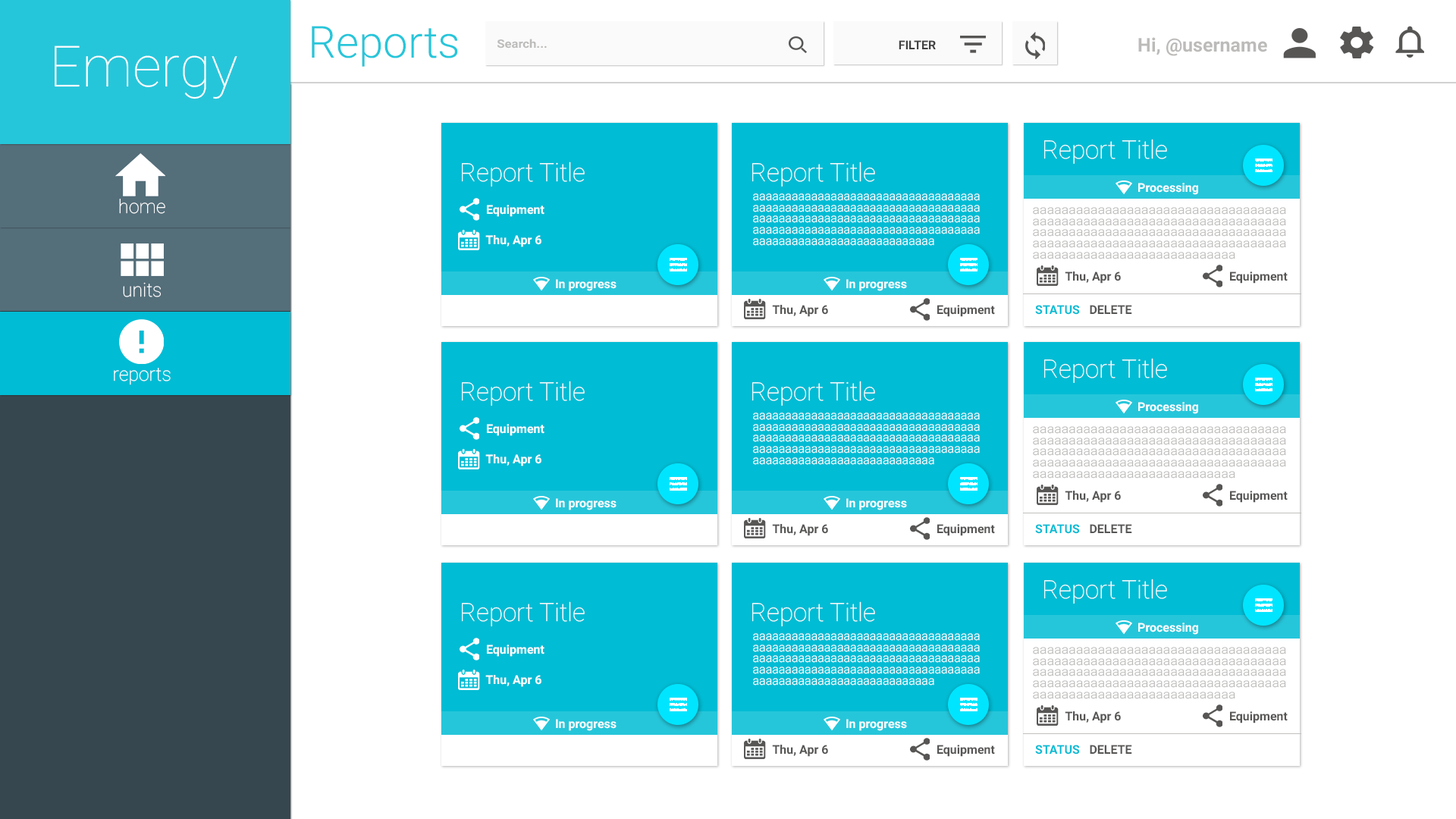
<style>
.page{position:relative;width:1456px;height:819px;background:#ffffff}
.page>*{position:absolute;margin:0}
.t1{font:44.2px "Roboto-Light";color:#26c6da}
.t2{font:11.6px "Roboto-Bold";color:#bcbbb9;scale:1.09 1}
.t3{font:12.1px "Roboto-Bold";color:#424242}
.t4{font:19px "Roboto-Bold";color:#bcbbb9}
.t5{font:56.9px "Roboto-Thin";color:#ffffff}
.t6{font:25.3px "Roboto-Thin";color:#fefefe}
.t7{font:12.1px "Roboto-Bold";color:#fefefe}
.t8{font:12.1px/2.2px "Roboto-Light";color:#ffffff}
.t9{font:19px "Roboto-Thin";color:#ffffff}
.t10{font:12.1px/2.2px "Roboto-Light";color:#bcbbb9;scale:1.12 1}
.t11{font:12.1px "Roboto-Bold";color:#575655}
.t12{font:12.1px "Roboto-Bold";color:#00bcd4}
</style>
<div class="page">
<p class="t1" style="left:312px;top:26px;width:146px;height:41px">Reports</p>
<p class="t2" style="left:497px;top:39px;width:50px;height:10px">Search...</p>
<p class="t3" style="left:899px;top:40px;width:37px;height:9px">FILTER</p>
<p class="t4" style="left:1138px;top:37px;width:129px;height:19px">Hi, @username</p>
<p class="t5" style="left:55px;top:45px;width:182px;height:54px">Emergy</p>
<p class="t6" style="left:1044px;top:139px;width:123px;height:25px">Report Title</p>
<p class="t6" style="left:462px;top:162px;width:123px;height:25px">Report Title</p>
<p class="t6" style="left:752px;top:162px;width:123px;height:25px">Report Title</p>
<p class="t7" style="left:1138px;top:183px;width:60px;height:12px">Processing</p>
<p class="t8" style="left:753px;top:193px;width:227px;height:53px">aaaaaaaaaaaaaaaaaaaaaaaaaaaaaaaaaaa<br><br><br><br><br>aaaaaaaaaaaaaaaaaaaaaaaaaaaaaaaaaaa<br><br><br><br><br>aaaaaaaaaaaaaaaaaaaaaaaaaaaaaaaaaaa<br><br><br><br><br>aaaaaaaaaaaaaaaaaaaaaaaaaaaaaaaaaaa<br><br><br><br><br>aaaaaaaaaaaaaaaaaaaaaaaaaaaa</p>
<p class="t9" style="left:119px;top:199px;width:46px;height:15px">home</p>
<p class="t7" style="left:487px;top:205px;width:57px;height:12px">Equipment</p>
<p class="t10" style="left:1033px;top:207px;width:253px;height:52px">aaaaaaaaaaaaaaaaaaaaaaaaaaaaaaaaaaa<br><br><br><br><br>aaaaaaaaaaaaaaaaaaaaaaaaaaaaaaaaaaa<br><br><br><br><br>aaaaaaaaaaaaaaaaaaaaaaaaaaaaaaaaaaa<br><br><br><br><br>aaaaaaaaaaaaaaaaaaaaaaaaaaaaaaaaaaa<br><br><br><br><br>aaaaaaaaaaaaaaaaaaaaaaaaaaaa</p>
<p class="t7" style="left:485px;top:235px;width:56px;height:12px">Thu, Apr 6</p>
<p class="t7" style="left:556px;top:279px;width:61px;height:12px">In progress</p>
<p class="t7" style="left:846px;top:279px;width:61px;height:12px">In progress</p>
<p class="t11" style="left:1065px;top:271px;width:56px;height:13px">Thu, Apr 6</p>
<p class="t11" style="left:1230px;top:271px;width:58px;height:13px">Equipment</p>
<p class="t9" style="left:123px;top:282px;width:38px;height:15px">units</p>
<p class="t11" style="left:772px;top:305px;width:56px;height:12px">Thu, Apr 6</p>
<p class="t11" style="left:937px;top:305px;width:58px;height:12px">Equipment</p>
<p class="t12" style="left:1035px;top:305px;width:45px;height:10px">STATUS</p>
<p class="t11" style="left:1090px;top:305px;width:42px;height:9px">DELETE</p>
<p class="t6" style="left:1044px;top:358px;width:123px;height:25px">Report Title</p>
<p class="t9" style="left:114px;top:368px;width:57px;height:17px">reports</p>
<p class="t6" style="left:462px;top:381px;width:123px;height:25px">Report Title</p>
<p class="t6" style="left:752px;top:381px;width:123px;height:25px">Report Title</p>
<p class="t7" style="left:1138px;top:402px;width:60px;height:12px">Processing</p>
<p class="t8" style="left:753px;top:413px;width:227px;height:52px">aaaaaaaaaaaaaaaaaaaaaaaaaaaaaaaaaaa<br><br><br><br><br>aaaaaaaaaaaaaaaaaaaaaaaaaaaaaaaaaaa<br><br><br><br><br>aaaaaaaaaaaaaaaaaaaaaaaaaaaaaaaaaaa<br><br><br><br><br>aaaaaaaaaaaaaaaaaaaaaaaaaaaaaaaaaaa<br><br><br><br><br>aaaaaaaaaaaaaaaaaaaaaaaaaaaa</p>
<p class="t7" style="left:487px;top:424px;width:57px;height:12px">Equipment</p>
<p class="t10" style="left:1033px;top:426px;width:253px;height:53px">aaaaaaaaaaaaaaaaaaaaaaaaaaaaaaaaaaa<br><br><br><br><br>aaaaaaaaaaaaaaaaaaaaaaaaaaaaaaaaaaa<br><br><br><br><br>aaaaaaaaaaaaaaaaaaaaaaaaaaaaaaaaaaa<br><br><br><br><br>aaaaaaaaaaaaaaaaaaaaaaaaaaaaaaaaaaa<br><br><br><br><br>aaaaaaaaaaaaaaaaaaaaaaaaaaaa</p>
<p class="t7" style="left:485px;top:454px;width:56px;height:12px">Thu, Apr 6</p>
<p class="t11" style="left:1065px;top:491px;width:56px;height:12px">Thu, Apr 6</p>
<p class="t11" style="left:1230px;top:491px;width:58px;height:12px">Equipment</p>
<p class="t7" style="left:556px;top:498px;width:61px;height:12px">In progress</p>
<p class="t7" style="left:846px;top:498px;width:61px;height:12px">In progress</p>
<p class="t11" style="left:772px;top:524px;width:56px;height:12px">Thu, Apr 6</p>
<p class="t11" style="left:937px;top:524px;width:58px;height:12px">Equipment</p>
<p class="t12" style="left:1035px;top:524px;width:45px;height:10px">STATUS</p>
<p class="t11" style="left:1090px;top:524px;width:42px;height:9px">DELETE</p>
<p class="t6" style="left:1044px;top:579px;width:123px;height:25px">Report Title</p>
<p class="t6" style="left:462px;top:601px;width:123px;height:25px">Report Title</p>
<p class="t6" style="left:752px;top:601px;width:123px;height:25px">Report Title</p>
<p class="t7" style="left:1138px;top:623px;width:60px;height:12px">Processing</p>
<p class="t8" style="left:753px;top:633px;width:227px;height:53px">aaaaaaaaaaaaaaaaaaaaaaaaaaaaaaaaaaa<br><br><br><br><br>aaaaaaaaaaaaaaaaaaaaaaaaaaaaaaaaaaa<br><br><br><br><br>aaaaaaaaaaaaaaaaaaaaaaaaaaaaaaaaaaa<br><br><br><br><br>aaaaaaaaaaaaaaaaaaaaaaaaaaaaaaaaaaa<br><br><br><br><br>aaaaaaaaaaaaaaaaaaaaaaaaaaaa</p>
<p class="t7" style="left:487px;top:645px;width:57px;height:12px">Equipment</p>
<p class="t10" style="left:1033px;top:647px;width:253px;height:52px">aaaaaaaaaaaaaaaaaaaaaaaaaaaaaaaaaaa<br><br><br><br><br>aaaaaaaaaaaaaaaaaaaaaaaaaaaaaaaaaaa<br><br><br><br><br>aaaaaaaaaaaaaaaaaaaaaaaaaaaaaaaaaaa<br><br><br><br><br>aaaaaaaaaaaaaaaaaaaaaaaaaaaaaaaaaaa<br><br><br><br><br>aaaaaaaaaaaaaaaaaaaaaaaaaaaa</p>
<p class="t7" style="left:485px;top:675px;width:56px;height:12px">Thu, Apr 6</p>
<p class="t11" style="left:1065px;top:711px;width:56px;height:12px">Thu, Apr 6</p>
<p class="t11" style="left:1230px;top:711px;width:58px;height:12px">Equipment</p>
<p class="t7" style="left:556px;top:719px;width:61px;height:12px">In progress</p>
<p class="t7" style="left:846px;top:719px;width:61px;height:12px">In progress</p>
<p class="t11" style="left:772px;top:745px;width:56px;height:12px">Thu, Apr 6</p>
<p class="t11" style="left:937px;top:745px;width:58px;height:12px">Equipment</p>
<p class="t12" style="left:1035px;top:745px;width:45px;height:10px">STATUS</p>
<p class="t11" style="left:1090px;top:745px;width:42px;height:9px">DELETE</p>
</div>
